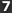
<style>
.page{position:relative;width:12px;height:13px}
.page>*{position:absolute;margin:0}
.t1{font:13.9px "K2D-ExtraBold";color:#ffffff}
</style>
<div class="page">
<p class="t1" style="left:2px;top:1px;width:9px;height:11px">7</p>
</div>
